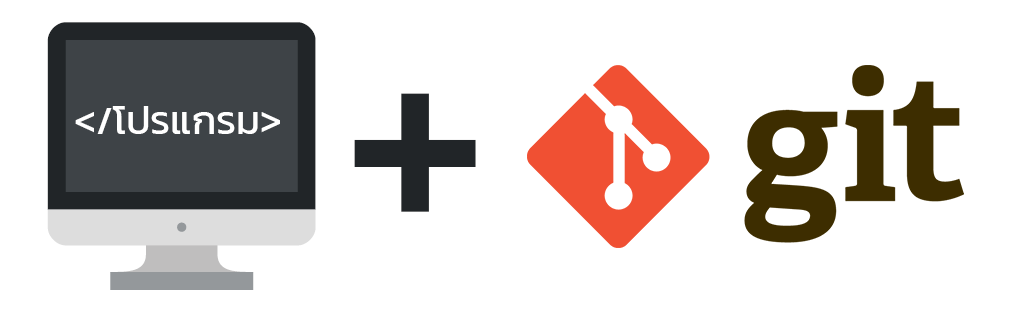
<style>
.page{position:relative;width:1011px;height:312px;background:#ffffff}
.page>*{position:absolute;margin:0}
.t1{font:317.5px "Kanit-Regular";color:#212528}
.t2{font:39.7px "Kanit-Regular";color:#ffffff}
</style>
<div class="page">
<p class="t1" style="left:354px;top:93px;width:122px;height:119px">+</p>
<p class="t2" style="left:75px;top:106px;width:205px;height:28px">&lt;/โปรแกรม&gt;</p>
</div>
